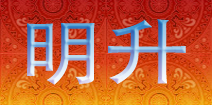
<style>
.page{position:relative;width:212px;height:105px}
.page>*{position:absolute;margin:0}
.t1{font:72px "AdobeHeitiStd-Regular";scale:1.2 1}
</style>
<div class="page">
<p class="t1" style="left:27px;top:19px;width:159px;height:66px">明升</p>
</div>
